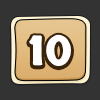
<style>
.page{position:relative;width:100px;height:100px;background:#333333}
.page>*{position:absolute;margin:0}
.t1{font:41px "Skranji-Bold";letter-spacing:0.02em;color:#ffffff}
</style>
<div class="page">
<p class="t1" style="left:29px;top:34px;width:42px;height:32px">10</p>
</div>
